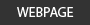
<style>
.page{position:relative;width:90px;height:25px;background:#333333}
.page>*{position:absolute;margin:0}
.t1{font:14px "MyriadPro-Regular";color:#ffffff}
</style>
<div class="page">
<p class="t1" style="left:17px;top:7px;width:57px;height:10px">WEBPAGE</p>
</div>
